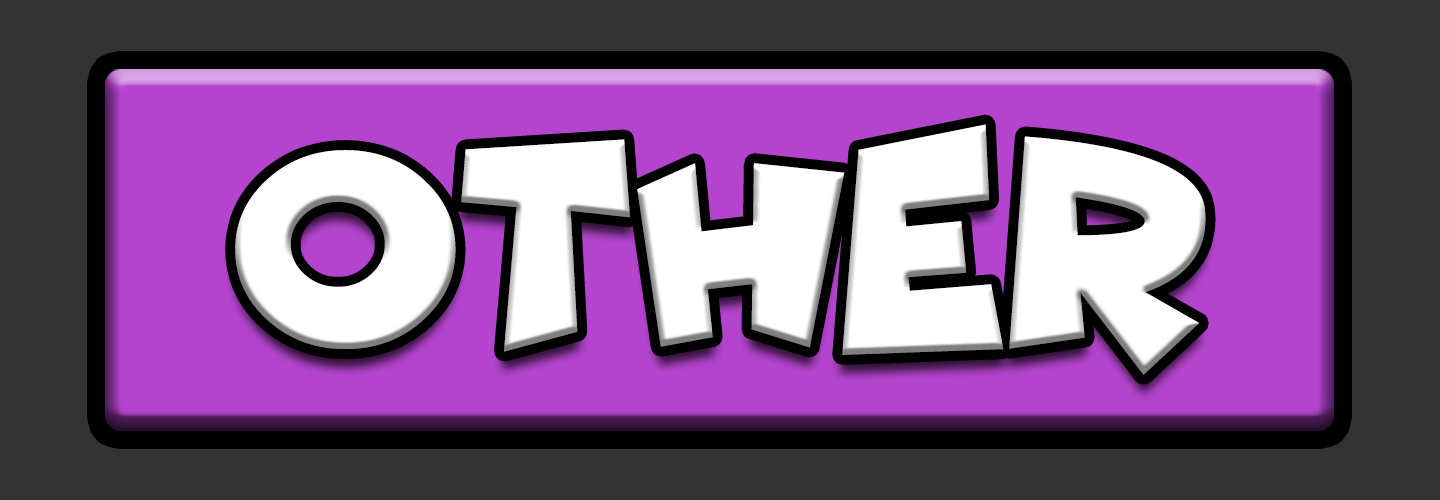
<style>
.page{position:relative;width:1440px;height:500px;background:#333333}
.page>*{position:absolute;margin:0}
.t1{font:290.6px "Funhouse";color:#ffffff;scale:0.95 1}
</style>
<div class="page">
<p class="t1" style="left:235px;top:124px;width:971px;height:251px">OTHER</p>
</div>
